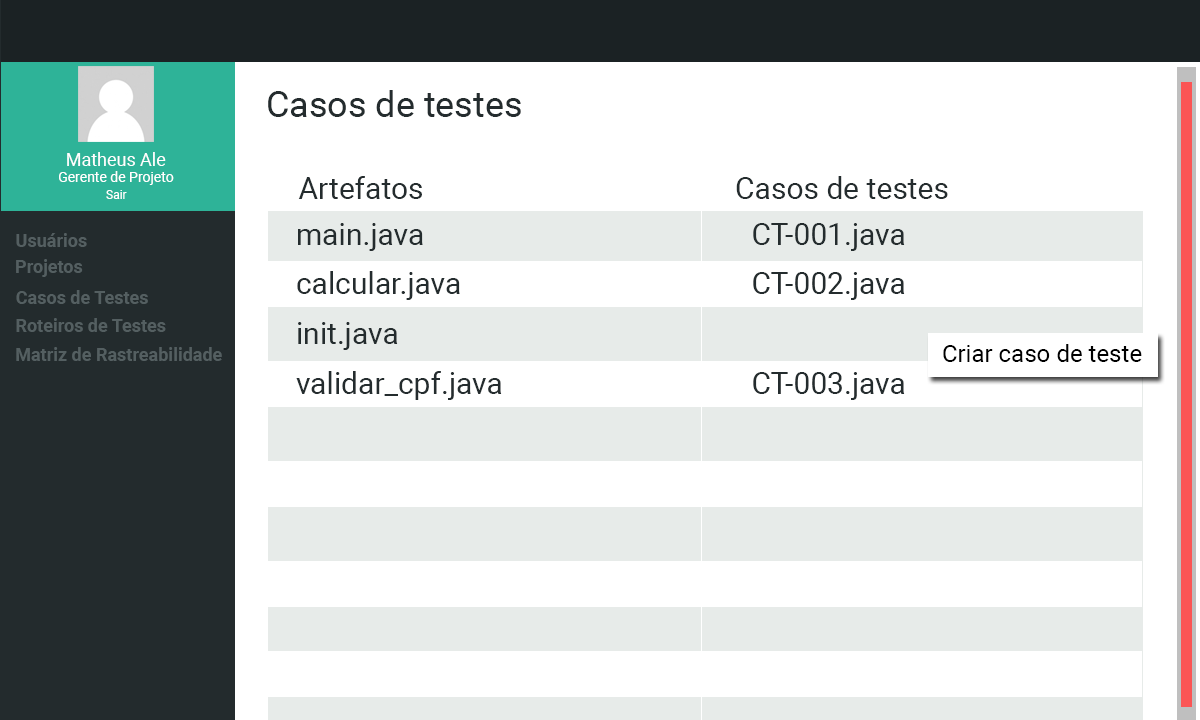
<style>
.page{position:relative;width:1200px;height:720px;background:#ffffff}
.page>*{position:absolute;margin:0}
.t1{font:36px "Roboto-Regular";color:#242c2e}
.t2{font:18.1px "Roboto-Regular";color:#ffffff}
.t3{font:14.1px "Roboto-Regular";color:#ffffff}
.t4{font:30px "Roboto-Regular";color:#242c2e}
.t5{font:12.1px "Roboto-Regular";color:#ffffff}
.t6{font:18px "Roboto-Bold";color:#545f61}
.t7{font:24px "Roboto-Regular";color:#000000}
</style>
<div class="page">
<p class="t1" style="left:268px;top:90px;width:253px;height:27px">Casos de testes</p>
<p class="t2" style="left:67px;top:152px;width:99px;height:14px">Matheus Ale</p>
<p class="t3" style="left:59px;top:171px;width:115px;height:14px">Gerente de Projeto</p>
<p class="t4" style="left:298px;top:176px;width:124px;height:23px">Artefatos</p>
<p class="t4" style="left:736px;top:176px;width:212px;height:23px">Casos de testes</p>
<p class="t5" style="left:106px;top:190px;width:21px;height:9px">Sair</p>
<p class="t6" style="left:16px;top:233px;width:71px;height:14px">Usuários</p>
<p class="t4" style="left:298px;top:223px;width:125px;height:28px">main.java</p>
<p class="t4" style="left:753px;top:223px;width:152px;height:28px">CT-001.java</p>
<p class="t6" style="left:16px;top:259px;width:67px;height:18px">Projetos</p>
<p class="t4" style="left:297px;top:271px;width:163px;height:29px">calcular.java</p>
<p class="t4" style="left:753px;top:272px;width:152px;height:28px">CT-002.java</p>
<p class="t6" style="left:16px;top:290px;width:132px;height:14px">Casos de Testes</p>
<p class="t6" style="left:16px;top:318px;width:150px;height:14px">Roteiros de Testes</p>
<p class="t4" style="left:298px;top:322px;width:100px;height:28px">init.java</p>
<p class="t6" style="left:16px;top:347px;width:206px;height:14px">Matriz de Rastreabilidade</p>
<p class="t7" style="left:943px;top:344px;width:199px;height:18px">Criar caso de teste</p>
<p class="t4" style="left:296px;top:371px;width:206px;height:29px">validar_cpf.java</p>
<p class="t4" style="left:753px;top:372px;width:152px;height:28px">CT-003.java</p>
</div>
